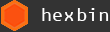
<style>
.page{position:relative;width:110px;height:32px;background:#333333}
.page>*{position:absolute;margin:0}
.t1{font:21px "Sudo";color:#ffffff;scale:1.21 1}
.t2{font:21px "Sudo";letter-spacing:0.08em;color:#ffffff;scale:1.21 1}
</style>
<div class="page">
<p class="t1" style="left:42px;top:8px;width:67px;height:13px">he<span class="t2">x</span>bin</p>
</div>
